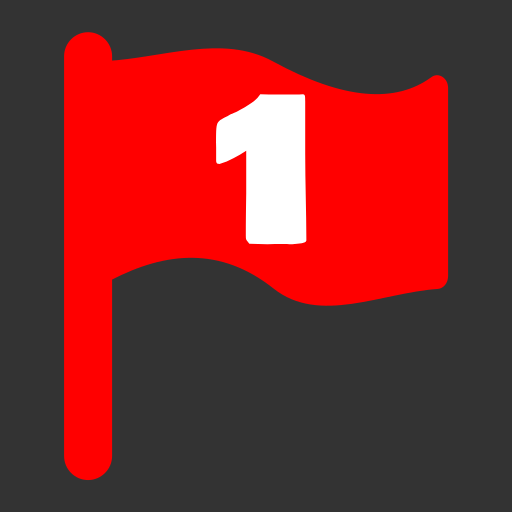
<style>
.page{position:relative;width:512px;height:512px;background:#333333}
.page>*{position:absolute;margin:0}
.t1{font:200px "BowlbyOneSC-Regular";color:#ffffff}
</style>
<div class="page">
<p class="t1" style="left:215px;top:94px;width:92px;height:151px">1</p>
</div>
